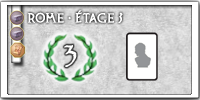
<style>
.page{position:relative;width:200px;height:100px}
.page>*{position:absolute;margin:0}
.t1{font:13px "PossumSaltareNF";letter-spacing:0.02em;color:#ffffff;font-weight:bold}
.t2{font:30.7px "Papyrus-Regular";letter-spacing:0.06em;color:#ffffff;font-weight:bold}
</style>
<div class="page">
<p class="t1" style="left:27px;top:10px;width:96px;height:13px">ROME - éTAGE 3</p>
<p class="t2" style="left:64px;top:45px;width:13px;height:22px">3</p>
</div>
